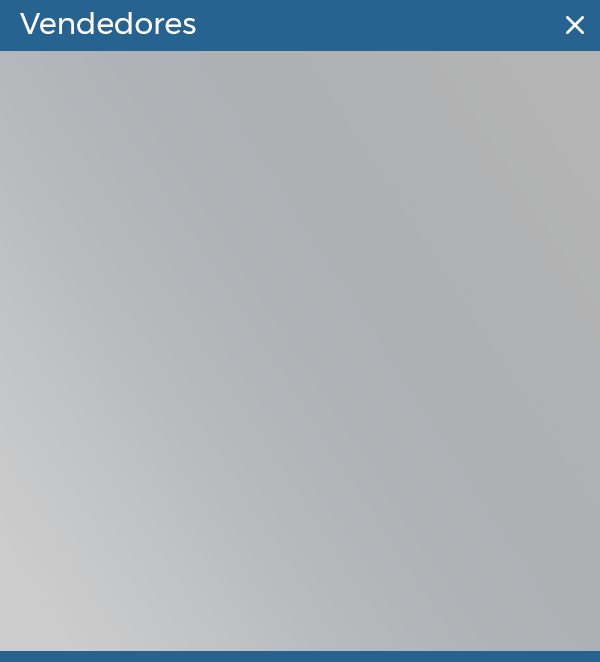
<style>
.page{position:relative;width:600px;height:662px}
.page>*{position:absolute;margin:0}
.t1{font:30px "Montserrat-Regular";color:#ffffff}
</style>
<div class="page">
<p class="t1" style="left:20px;top:12px;width:176px;height:22px">Vendedores</p>
</div>
